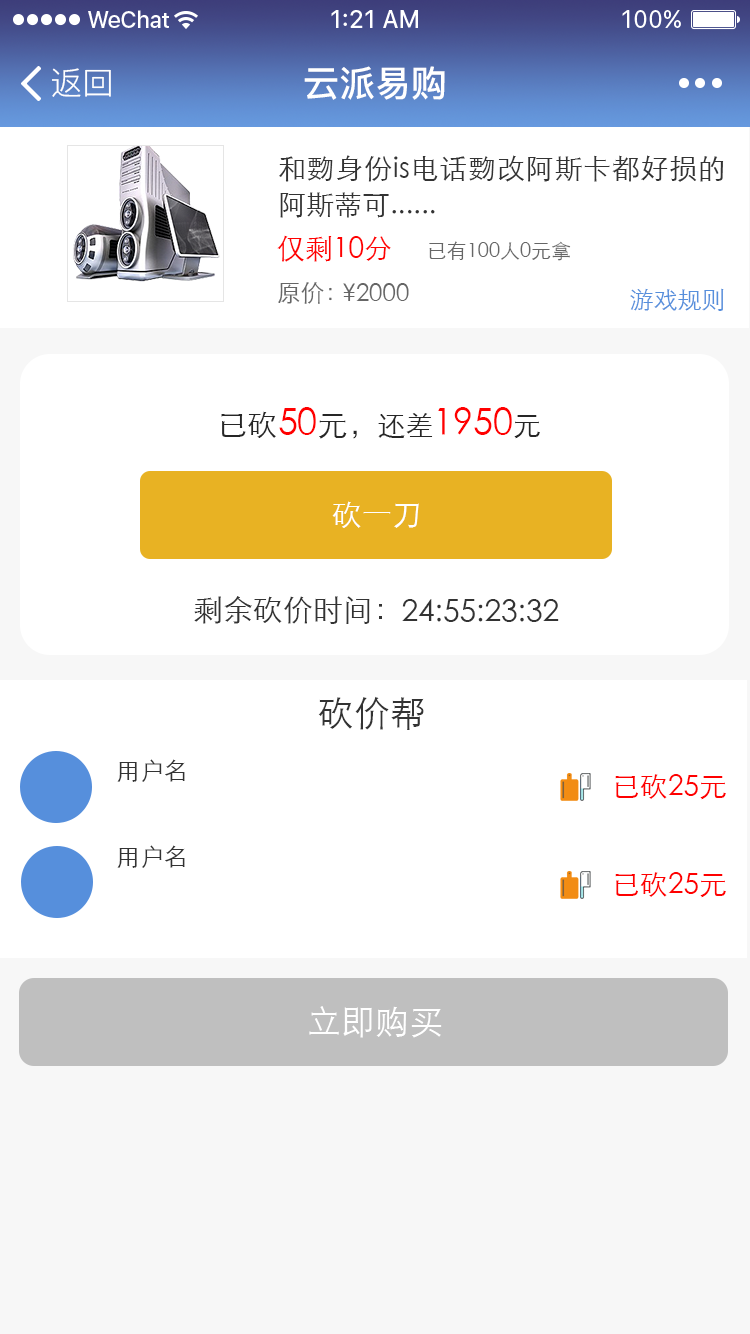
<style>
.page{position:relative;width:750px;height:1334px;background:#ffffff}
.page>*{position:absolute;margin:0}
.t1{font:32px "PingFang-SC-Regular";color:#ffffff}
.t2{font:36px "PingFang-SC-Bold";color:#ffffff}
.t3{font:28px/36px "STXihei";color:#333333}
.t4{font:28px "STXihei";color:#ff0101}
.t5{font:20px "STXihei";color:#666666}
.t6{font:24px "STXihei";color:#666666}
.t7{font:24px "STXihei";color:#568fdc}
.t8{font:36px "STXihei";color:#ff0000}
.t9{font:30px "STXihei";color:#262626}
.t10{font:28px "STXihei";color:#262626}
.t11{font:30px "STXihei";color:#ffffff}
.t12{font:30px "STXihei";color:#333333}
.t13{font:36px "STXihei";color:#333333}
.t14{font:24px "STXihei";color:#333333}
.t15{font:28px "STXihei";color:#fe0000}
.t16{font:34px "STXihei";color:#ffffff}
</style>
<div class="page">
<p class="t1" style="left:52px;top:68px;width:59px;height:29px">返回</p>
<p class="t2" style="left:304px;top:66px;width:141px;height:34px">云派易购</p>
<p class="t3" style="left:279px;top:155px;width:445px;height:63px;text-align:justify">和覅身份is电话覅改阿斯卡都好损的阿斯蒂可......</p>
<p class="t4" style="left:277px;top:235px;width:114px;height:27px">仅剩10分</p>
<p class="t5" style="left:429px;top:241px;width:142px;height:20px">已有100人0元拿</p>
<p class="t6" style="left:278px;top:282px;width:54px;height:22px">原价：</p>
<p class="t6" style="left:343px;top:283px;width:66px;height:18px">¥2000</p>
<p class="t7" style="left:630px;top:288px;width:94px;height:23px">游戏规则</p>
<p class="t8" style="left:221px;top:407px;width:319px;height:32px"><span class="t9">已砍</span>50<span class="t9">元，</span><span class="t10">还差</span>1950<span class="t10">元</span></p>
<p class="t11" style="left:332px;top:501px;width:87px;height:27px">砍一刀</p>
<p class="t12" style="left:194px;top:596px;width:188px;height:28px">剩余砍价时间：</p>
<p class="t12" style="left:402px;top:599px;width:157px;height:23px">24:55:23:32</p>
<p class="t13" style="left:318px;top:696px;width:106px;height:34px">砍价帮</p>
<p class="t14" style="left:117px;top:759px;width:68px;height:23px">用户名</p>
<p class="t15" style="left:615px;top:774px;width:111px;height:26px">已砍25元</p>
<p class="t14" style="left:117px;top:845px;width:68px;height:23px">用户名</p>
<p class="t15" style="left:615px;top:872px;width:111px;height:26px">已砍25元</p>
<p class="t16" style="left:309px;top:1006px;width:133px;height:32px">立即购买</p>
</div>
